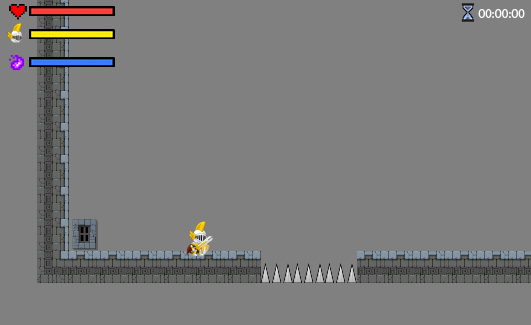
<style>
.page{position:relative;width:531px;height:325px;background:#808080}
.page>*{position:absolute;margin:0}
.t1{font:13.3px "MyriadPro-Regular";color:#ffffff}
</style>
<div class="page">
<p class="t1" style="left:478px;top:9px;width:47px;height:9px">00:00:00</p>
</div>
